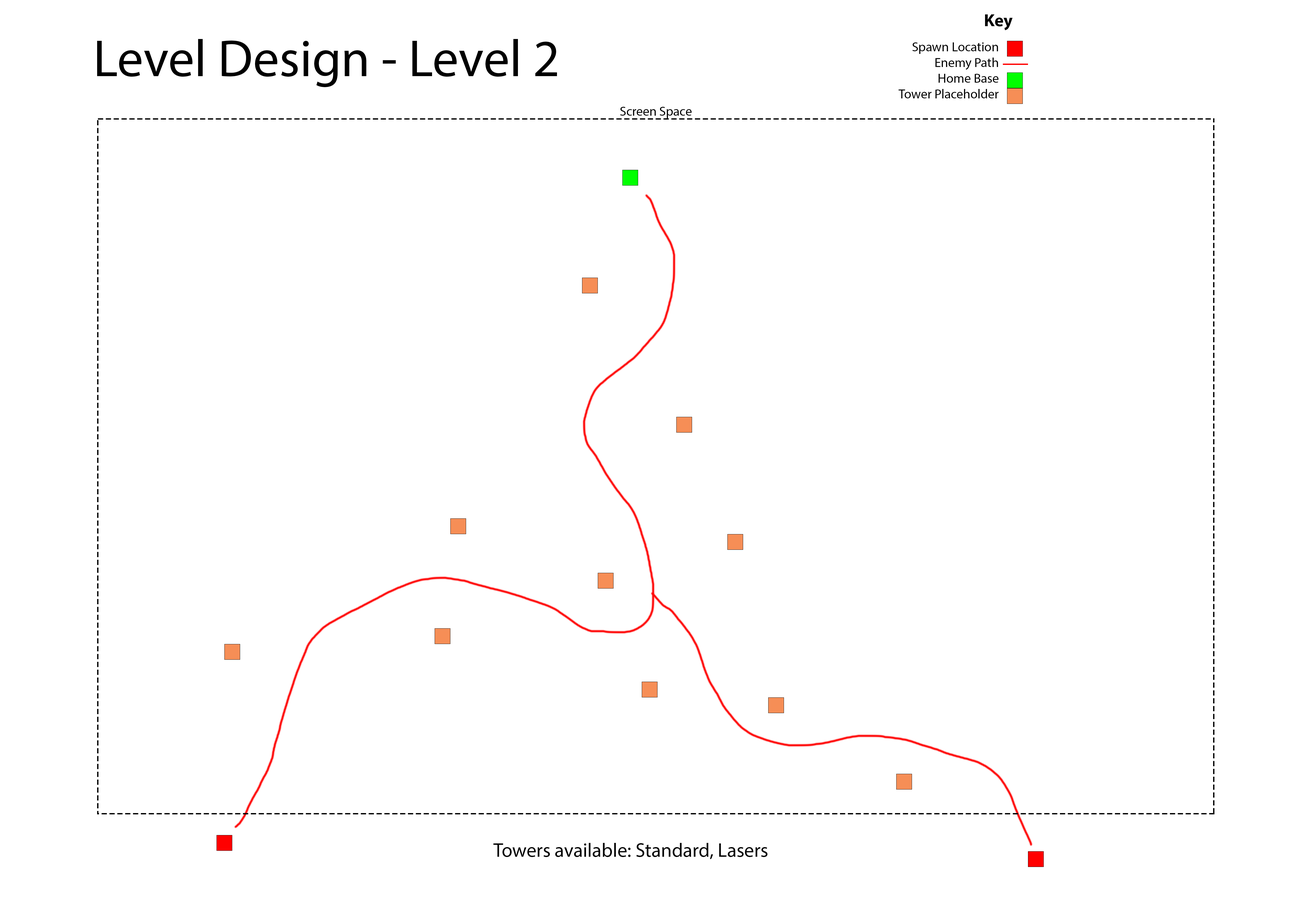
<style>
.page{position:relative;width:1299px;height:918px;background:#ffffff}
.page>*{position:absolute;margin:0}
.t1{font:17.5px "MyriadPro-Bold";color:#000000}
.t2{font:52.4px "MyriadPro-Regular";color:#000000}
.t3{font:13.1px "MyriadPro-Regular";color:#000000}
.t4{font:3.1px "MyriadPro-Regular";color:#000000}
.t5{font:19.6px "MyriadPro-Regular";color:#000000}
</style>
<div class="page">
<p class="t1" style="left:985px;top:14px;width:27px;height:16px">Key</p>
<p class="t2" style="left:97px;top:39px;width:460px;height:48px">Level Design - Level 2</p>
<p class="t3" style="left:898px;top:42px;width:100px;height:56px;text-align:right">Spawn Location<br>Enemy Path<br>Home Base<br>Tower Placeholder</p>
<p class="t4" style="left:620px;top:107px;width:72px;height:11px">Screen Space</p>
<p class="t5" style="left:493px;top:843px;width:274px;height:16px">Towers available: Standard, Lasers</p>
</div>
